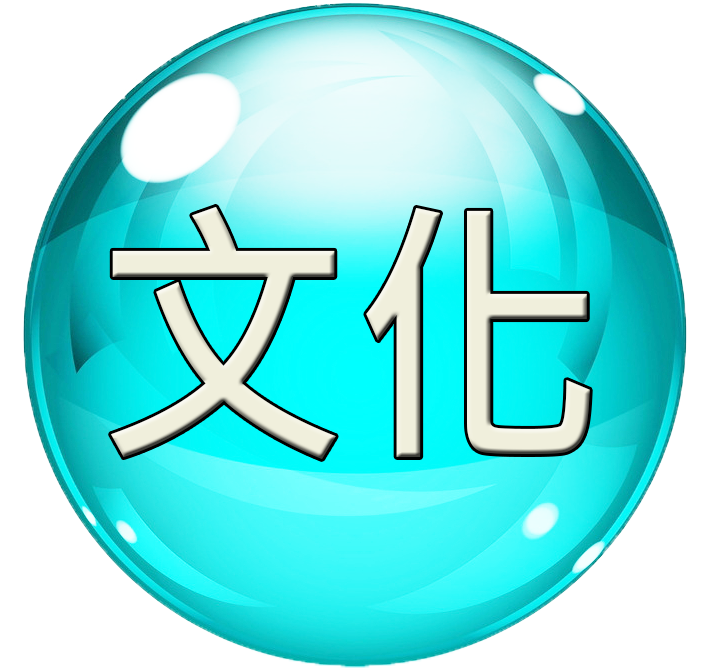
<style>
.page{position:relative;width:717px;height:668px;background:#ffffff}
.page>*{position:absolute;margin:0}
.t1{font:283.1px "MicrosoftJhengHeiBold";color:#f0efdc;scale:0.9 1}
</style>
<div class="page">
<p class="t1" style="left:111px;top:206px;width:479px;height:253px">文化</p>
</div>
